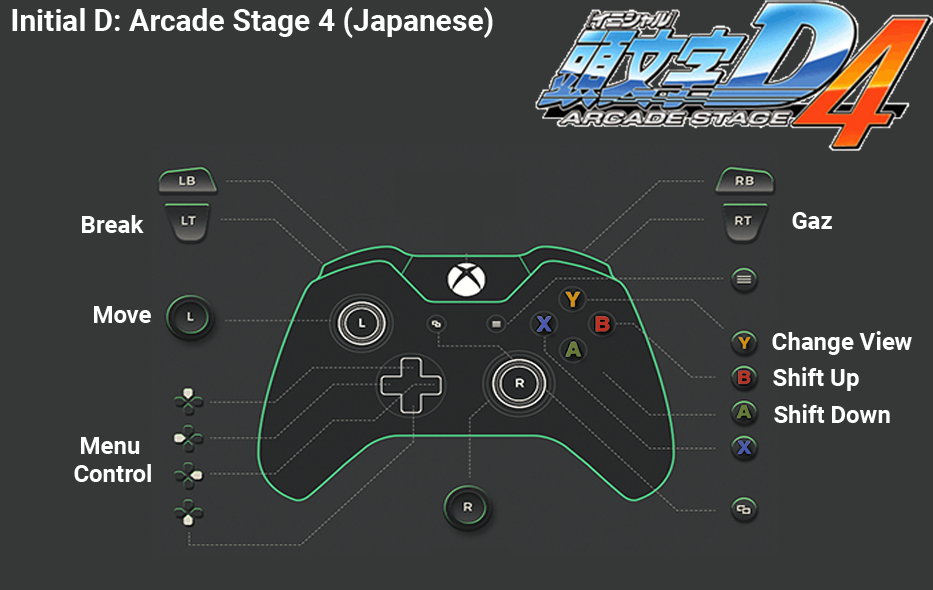
<style>
.page{position:relative;width:933px;height:590px;background:#363838}
.page>*{position:absolute;margin:0}
.t1{font:30px "Roboto-Bold";color:#ffffff}
.t2{font:24px "Roboto-Bold";color:#ffffff}
.t3{font:24px/28px "Roboto-Bold";color:#ffffff}
</style>
<div class="page">
<p class="t1" style="left:12px;top:7px;width:481px;height:31px">Initial D: Arcade Stage 4 (Japanese)</p>
<p class="t2" style="left:82px;top:215px;width:62px;height:18px">Break</p>
<p class="t2" style="left:792px;top:212px;width:40px;height:17px">Gaz</p>
<p class="t2" style="left:94px;top:306px;width:57px;height:17px">Move</p>
<p class="t2" style="left:772px;top:331px;width:140px;height:24px">Change View</p>
<p class="t2" style="left:773px;top:367px;width:86px;height:24px">Shift Up</p>
<p class="t2" style="left:774px;top:404px;width:116px;height:19px">Shift Down</p>
<p class="t3" style="left:74px;top:437px;width:77px;height:45px;text-align:center">Menu <br>Control</p>
</div>
